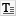
<style>
.page{position:relative;width:16px;height:16px}
.page>*{position:absolute;margin:0}
.t1{font:12px "Georgia";color:#030303}
</style>
<div class="page">
<p class="t1" style="left:2px;top:3px;width:8px;height:9px">T</p>
</div>
